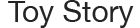
<style>
.page{position:relative;width:140px;height:28px;background:#ffffff}
.page>*{position:absolute;margin:0}
.t1{font:30px "HelveticaNeue";color:#242424}
</style>
<div class="page">
<p class="t1" style="left:8px;top:0px;width:126px;height:28px">Toy Story</p>
</div>
